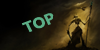
<style>
.page{position:relative;width:100px;height:50px}
.page>*{position:absolute;margin:0}
.t1{font:14.2px "MicrosoftYaHei-Bold";color:#5bad86;scale:1.08 1}
</style>
<div class="page">
<p class="t1" style="left:21px;top:13px;width:33px;height:19px;rotate:-21deg">TOP<br><br>TOP</p>
</div>
